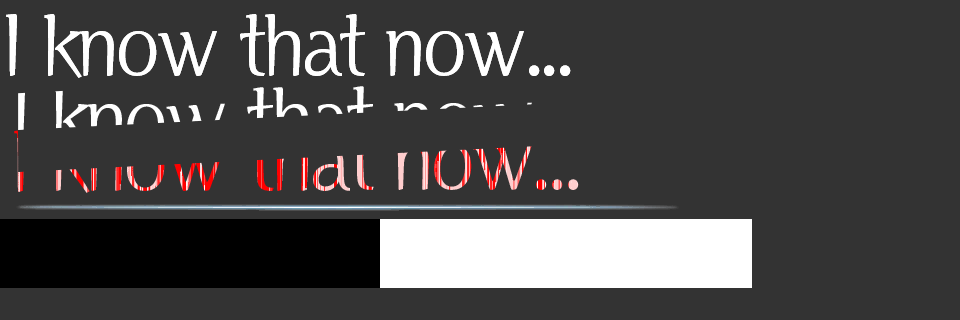
<style>
.page{position:relative;width:960px;height:320px;background:#333333}
.page>*{position:absolute;margin:0}
.t1{font:84px "MoariaStd-Regular";letter-spacing:-0.06em;color:#ffffff;scale:0.95 1}
.t2{font:84px "MoariaStd-Regular";letter-spacing:-0.06em;scale:0.95 1}
</style>
<div class="page">
<p class="t1" style="left:6px;top:14px;width:565px;height:64px">I know that now...</p>
<p class="t1" style="left:6px;top:14px;width:565px;height:64px">I know that now...</p>
<p class="t2" style="left:14px;top:86px;width:565px;height:65px">I know that now...</p>
<p class="t2" style="left:14px;top:128px;width:565px;height:65px">I know that now...</p>
</div>
